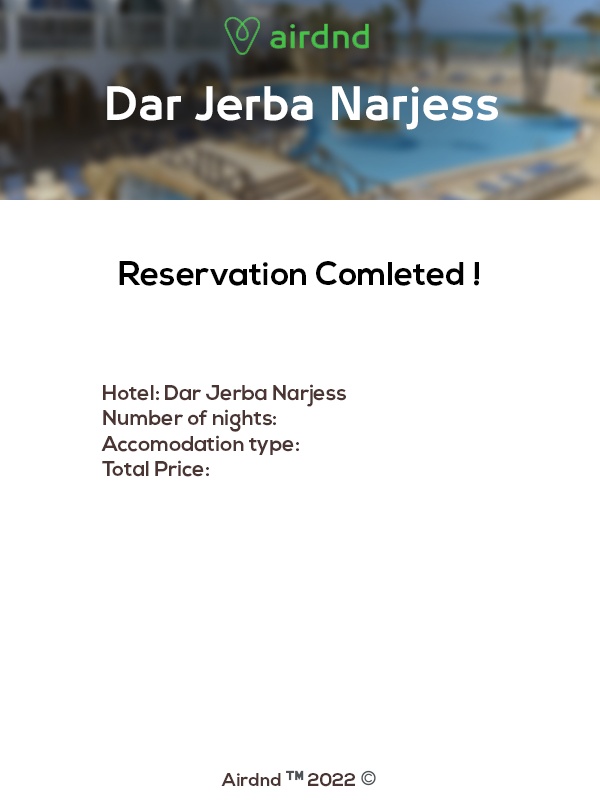
<style>
.page{position:relative;width:600px;height:800px;background:#ffffff}
.page>*{position:absolute;margin:0}
.t1{font:33.2px "NexaBold";color:#000000}
.t2{font:21.1px "NexaBold";color:#4b3533}
.t3{font:18.3px "NexaBold";color:#4b3533}
.t4{font:18.3px "EmojiOneColor";color:#4b3533}
</style>
<div class="page">
<p class="t1" style="left:119px;top:261px;width:360px;height:25px">Reservation Comleted !</p>
<p class="t2" style="left:101px;top:384px;width:245px;height:93px">Hotel: Dar Jerba Narjess<br>Number of nights:<br>Accomodation type:<br>Total Price:</p>
<p class="t3" style="left:221px;top:770px;width:155px;height:17px">Airdnd <span class="t4">™ </span>2022 <span class="t4">©</span></p>
</div>
